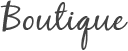
<style>
.page{position:relative;width:128px;height:51px;background:#ffffff}
.page>*{position:absolute;margin:0}
.t1{font:38px "BlackJackRegular";color:#434343}
</style>
<div class="page">
<p class="t1" style="left:0px;top:0px;width:128px;height:50px">Boutique</p>
</div>
